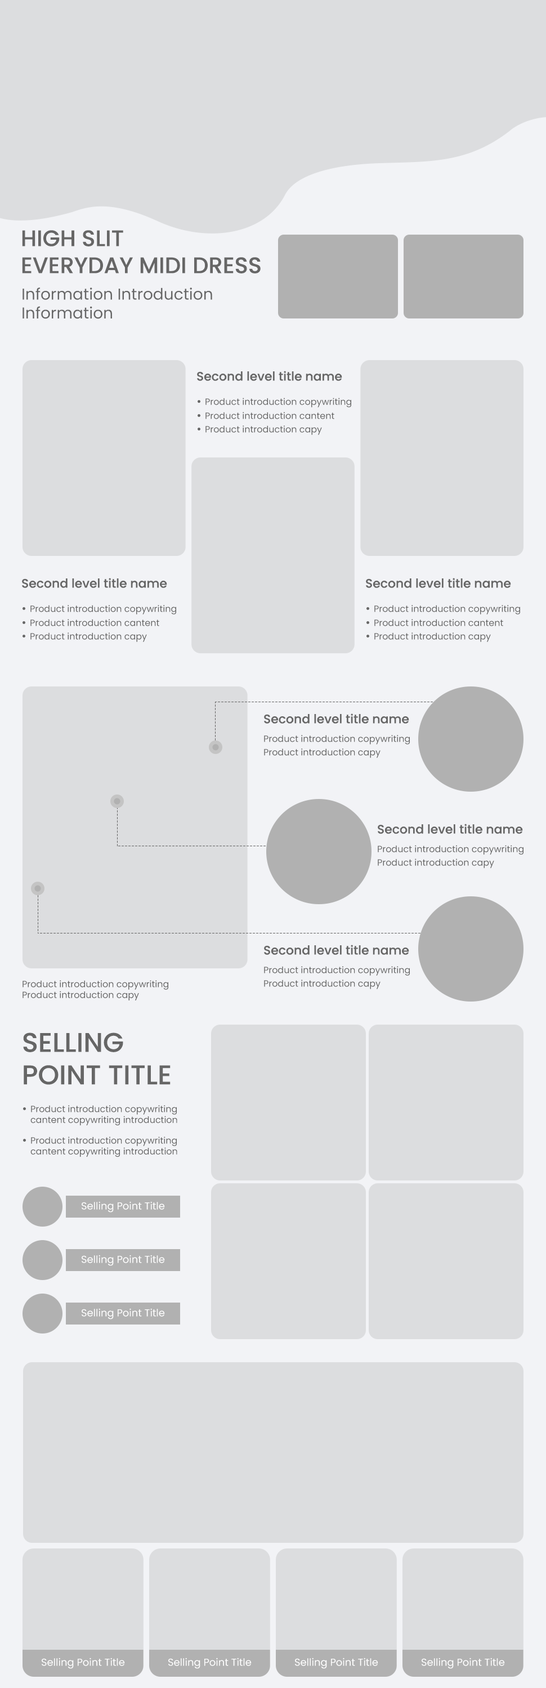
<style>
.page{position:relative;width:546px;height:1688px;background:#dcdddf}
.page>*{position:absolute;margin:0}
.t1{font:22.5px "Poppins-Medium";color:#666666}
.t2{font:15.8px "Poppins-Regular";color:#666666}
.t3{font:12.4px "Poppins-Medium";color:#666666}
.t4{font:9px "Poppins-Regular";color:#666666}
.t5{font:27px "Poppins-Medium";color:#666666}
.t6{font:10.1px "Poppins-Regular";color:#ffffff}
</style>
<div class="page">
<p class="t1" style="left:22px;top:230px;width:238px;height:43px">HIGH SLIT<br>EVERYDAY MIDI DRESS</p>
<p class="t2" style="left:22px;top:287px;width:190px;height:32px">Information Introduction<br>Information</p>
<p class="t3" style="left:197px;top:371px;width:145px;height:10px">Second level title name</p>
<p class="t4" style="left:205px;top:398px;width:146px;height:9px">Product introduction copywriting</p>
<p class="t4" style="left:205px;top:412px;width:129px;height:7px">Product introduction cantent</p>
<p class="t4" style="left:205px;top:425px;width:117px;height:10px">Product introduction capy</p>
<p class="t3" style="left:22px;top:578px;width:145px;height:10px">Second level title name</p>
<p class="t3" style="left:366px;top:578px;width:145px;height:10px">Second level title name</p>
<p class="t4" style="left:30px;top:605px;width:146px;height:9px">Product introduction copywriting</p>
<p class="t4" style="left:374px;top:605px;width:146px;height:9px">Product introduction copywriting</p>
<p class="t4" style="left:30px;top:619px;width:129px;height:7px">Product introduction cantent</p>
<p class="t4" style="left:374px;top:619px;width:129px;height:7px">Product introduction cantent</p>
<p class="t4" style="left:30px;top:632px;width:117px;height:10px">Product introduction capy</p>
<p class="t4" style="left:374px;top:632px;width:116px;height:10px">Product introduction capy</p>
<p class="t3" style="left:264px;top:713px;width:145px;height:10px">Second level title name</p>
<p class="t4" style="left:264px;top:735px;width:146px;height:9px">Product introduction copywriting</p>
<p class="t4" style="left:264px;top:748px;width:116px;height:10px">Product introduction capy</p>
<p class="t3" style="left:377px;top:824px;width:146px;height:10px">Second level title name</p>
<p class="t4" style="left:377px;top:845px;width:146px;height:9px">Product introduction copywriting</p>
<p class="t4" style="left:377px;top:858px;width:117px;height:10px">Product introduction capy</p>
<p class="t3" style="left:264px;top:944px;width:145px;height:11px">Second level title name</p>
<p class="t4" style="left:264px;top:966px;width:146px;height:9px">Product introduction copywriting</p>
<p class="t4" style="left:22px;top:980px;width:146px;height:20px">Product introduction copywriting<br>Product introduction capy</p>
<p class="t4" style="left:264px;top:979px;width:116px;height:10px">Product introduction capy</p>
<p class="t5" style="left:23px;top:1032px;width:147px;height:52px">SELLING<br>POINT TITLE</p>
<p class="t4" style="left:30px;top:1105px;width:147px;height:20px">Product introduction copywriting<br>cantent copywriting introduction</p>
<p class="t4" style="left:30px;top:1136px;width:147px;height:20px">Product introduction copywriting<br>cantent copywriting introduction</p>
<p class="t6" style="left:82px;top:1201px;width:83px;height:11px">Selling Point Title</p>
<p class="t6" style="left:82px;top:1254px;width:83px;height:12px">Selling Point Title</p>
<p class="t6" style="left:82px;top:1308px;width:83px;height:11px">Selling Point Title</p>
<p class="t6" style="left:42px;top:1657px;width:83px;height:11px">Selling Point Title</p>
<p class="t6" style="left:168px;top:1657px;width:83px;height:11px">Selling Point Title</p>
<p class="t6" style="left:295px;top:1657px;width:83px;height:11px">Selling Point Title</p>
<p class="t6" style="left:421px;top:1657px;width:84px;height:11px">Selling Point Title</p>
</div>
